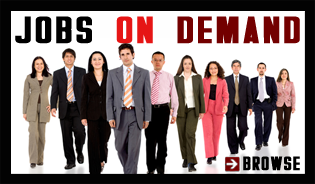
<style>
.page{position:relative;width:315px;height:184px;background:#ffffff}
.page>*{position:absolute;margin:0}
.t1{font:38.6px "Overseer";letter-spacing:0.05em;color:#730000;font-weight:bold;scale:1.1 1}
.t2{font:38.6px "Overseer";letter-spacing:0.05em;color:#000000;font-weight:bold;scale:1.1 1}
.t3{font:38.6px "Overseer";letter-spacing:0.05em;color:#e61515;font-weight:bold;scale:1.1 1}
.t4{font:19.6px "Overseer";letter-spacing:0.05em;color:#000000;font-weight:bold}
</style>
<div class="page">
<p class="t1" style="left:15px;top:16px;width:285px;height:28px"><span class="t2">J0BS </span><span class="t3">0N </span>DEMAND</p>
<p class="t4" style="left:243px;top:156px;width:57px;height:15px">BR0WSE</p>
</div>
